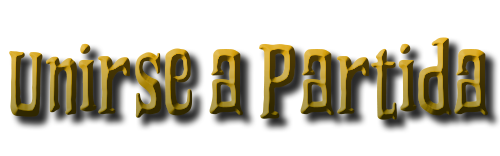
<style>
.page{position:relative;width:500px;height:156px;background:#ffffff}
.page>*{position:absolute;margin:0}
.t1{font:114.7px "Grooving"}
</style>
<div class="page">
<p class="t1" style="left:9px;top:37px;width:479px;height:83px">Unirse a Partida</p>
</div>
